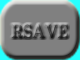
<style>
.page{position:relative;width:80px;height:60px;background:#808080}
.page>*{position:absolute;margin:0}
.t1{font:18px "MyungjoXB-HM"}
</style>
<div class="page">
<p class="t1" style="left:11px;top:24px;width:57px;height:14px">RSAVE</p>
</div>
